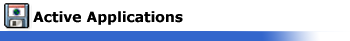
<style>
.page{position:relative;width:350px;height:41px;background:#ffffff}
.page>*{position:absolute;margin:0}
.t1{font:14px "Verdana-Bold";color:#000000}
</style>
<div class="page">
<p class="t1" style="left:33px;top:11px;width:150px;height:14px">Active Applications</p>
</div>
